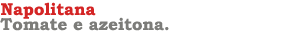
<style>
.page{position:relative;width:300px;height:50px;background:#ffffff}
.page>*{position:absolute;margin:0}
.t1{font:17px "BookmanOldStyle-Bold";color:#d42525}
.t2{font:17px "BookmanOldStyle-Bold";color:#7c7c79}
</style>
<div class="page">
<p class="t1" style="left:1px;top:2px;width:95px;height:17px">Napolitana</p>
<p class="t2" style="left:0px;top:17px;width:169px;height:14px">Tomate e azeitona.</p>
</div>
